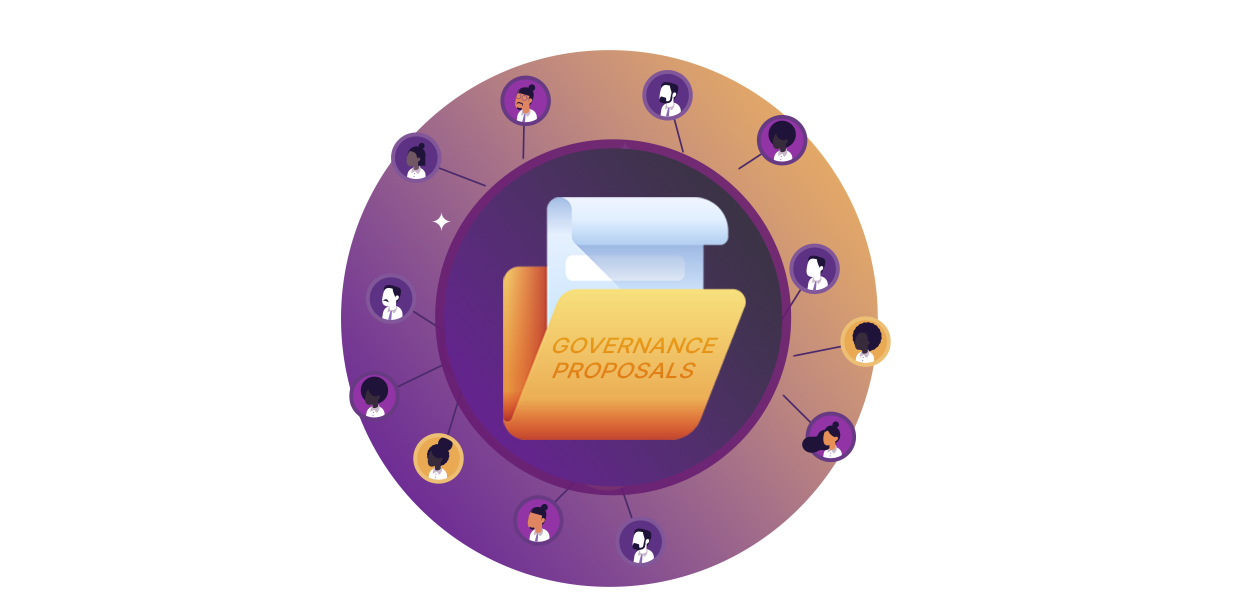
<style>
.page{position:relative;width:1240px;height:600px;background:#ffffff}
.page>*{position:absolute;margin:0}
.t1{font:22.6px "Inter-Medium";color:#e49116;text-transform:uppercase;scale:1.03 1}
</style>
<div class="page">
<p class="t1" style="left:552px;top:337px;width:167px;height:42px;text-align:center">governance proposals</p>
</div>
